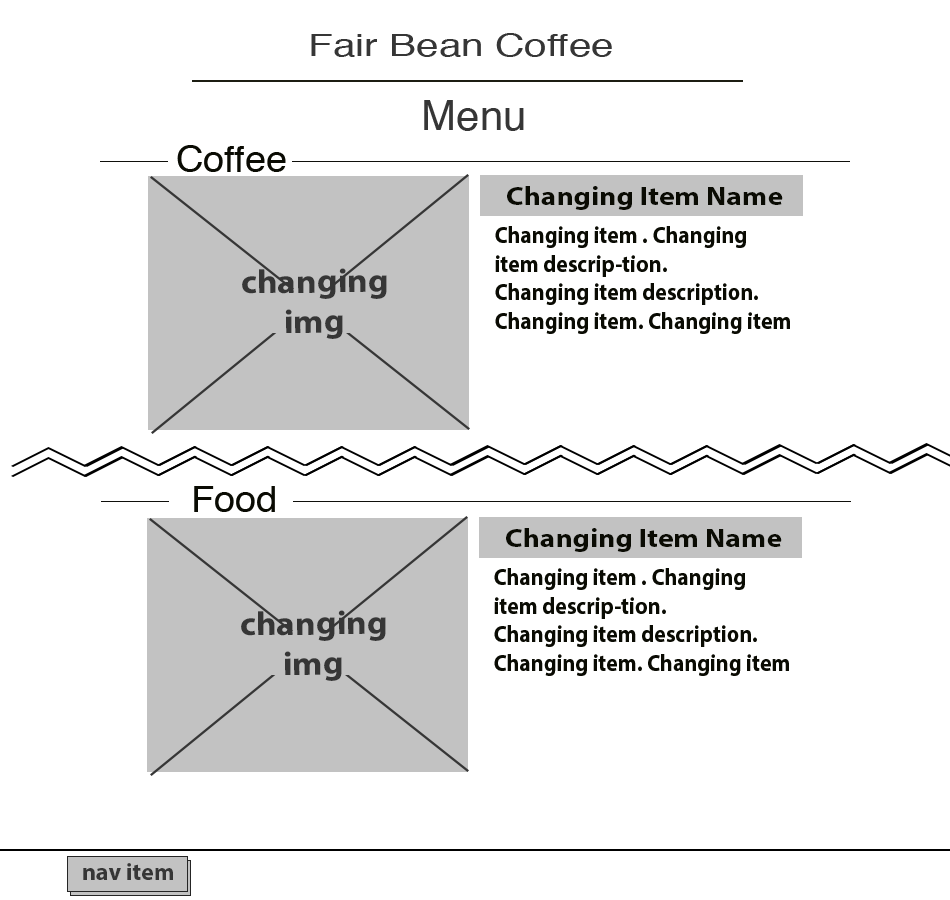
<style>
.page{position:relative;width:950px;height:900px;background:#ffffff}
.page>*{position:absolute;margin:0}
.t1{font:31px "Helvetica";color:#363636;scale:1.31 1}
.t2{font:42px "Helvetica";color:#363636}
.t3{font:35.6px "Helvetica";color:#0a0b03;scale:1.07 1}
.t4{font:65px "MyriadPro-Bold";color:#0a0b03;scale:1.07 1}
.t5{font:26.9px "MyriadPro-Bold";color:#0a0b03;scale:1.1 1}
.t6{font:23.8px "MyriadPro-Bold";color:#0a0b03;scale:0.92 1}
.t7{font:33.4px "MyriadPro-Bold";color:#363636;scale:1.06 1}
.t8{font:24px "MyriadPro-Bold";color:#363636}
</style>
<div class="page">
<p class="t1" style="left:311px;top:33px;width:301px;height:24px">Fair Bean Coffee</p>
<p class="t2" style="left:424px;top:100px;width:100px;height:31px">Menu</p>
<p class="t3" style="left:177px;top:145px;width:109px;height:27px"><span class="t4">        </span>Coffee</p>
<p class="t5" style="left:507px;top:186px;width:276px;height:24px">Changing Item Name</p>
<p class="t6" style="left:495px;top:226px;width:295px;height:108px">Changing item . Changing <br>item descrip-tion. <br>Changing item description.<br>Changing item. Changing item</p>
<p class="t7" style="left:242px;top:268px;width:145px;height:71px">changing<br> img</p>
<p class="t3" style="left:194px;top:486px;width:81px;height:26px"><span class="t4">         </span>Food</p>
<p class="t5" style="left:506px;top:528px;width:276px;height:24px">Changing Item Name</p>
<p class="t6" style="left:494px;top:568px;width:295px;height:108px">Changing item . Changing <br>item descrip-tion. <br>Changing item description.<br>Changing item. Changing item</p>
<p class="t7" style="left:241px;top:610px;width:145px;height:71px">changing<br> img</p>
<p class="t8" style="left:83px;top:863px;width:90px;height:17px">nav item</p>
</div>
